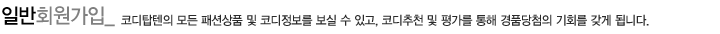
<style>
.page{position:relative;width:720px;height:34px;background:#ffffff}
.page>*{position:absolute;margin:0}
.t1{font:21px "YDIYGO330";letter-spacing:-0.03em;color:#808080;scale:0.92 1}
.t2{font:21px "YDIYGO330";letter-spacing:-0.03em;color:#000000;scale:0.92 1}
.t3{font:12.6px "YDIYGO330";letter-spacing:-0.03em;color:#2b2b2b;scale:0.92 1}
</style>
<div class="page">
<p class="t1" style="left:2px;top:6px;width:113px;height:21px"><span class="t2">일반</span>회원가입_</p>
<p class="t3" style="left:121px;top:14px;width:528px;height:13px">코디탑텐의 모든 패션상품 및 코디정보를 보실 수 있고, 코디추천 및 평가를 통해 경품당첨의 기회를 갖게 됩니다.</p>
</div>
